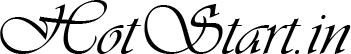
<style>
.page{position:relative;width:351px;height:54px;background:#ffffff}
.page>*{position:absolute;margin:0}
.t1{font:72px "Vivaldii";color:#000000}
</style>
<div class="page">
<p class="t1" style="left:0px;top:0px;width:351px;height:54px">HotStart.in</p>
</div>
